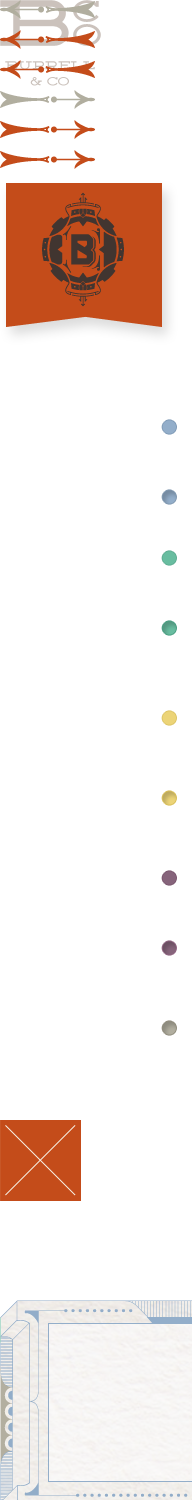
<style>
.page{position:relative;width:192px;height:1500px;background:#ffffff}
.page>*{position:absolute;margin:0}
.t1{font:11px/16px "DemingEP";text-transform:uppercase}
</style>
<div class="page">
<p class="t1" style="left:5px;top:61px;width:90px;height:25px;text-align:center">Burrell<br>&amp; Co</p>
</div>
